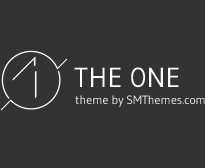
<style>
.page{position:relative;width:205px;height:168px;background:#333333}
.page>*{position:absolute;margin:0}
.t1{font:27.5px "Gudea";color:#ffffff}
.t2{font:27.5px "Gudea";color:#ffffff;scale:0.91 1}
.t3{font:12px "Gudea";color:#ebebeb}
</style>
<div class="page">
<p class="t1" style="left:74px;top:67px;width:105px;height:21px">THE <span class="t2">O</span>NE</p>
<p class="t3" style="left:75px;top:95px;width:130px;height:12px">theme by SMThemes.com</p>
</div>
